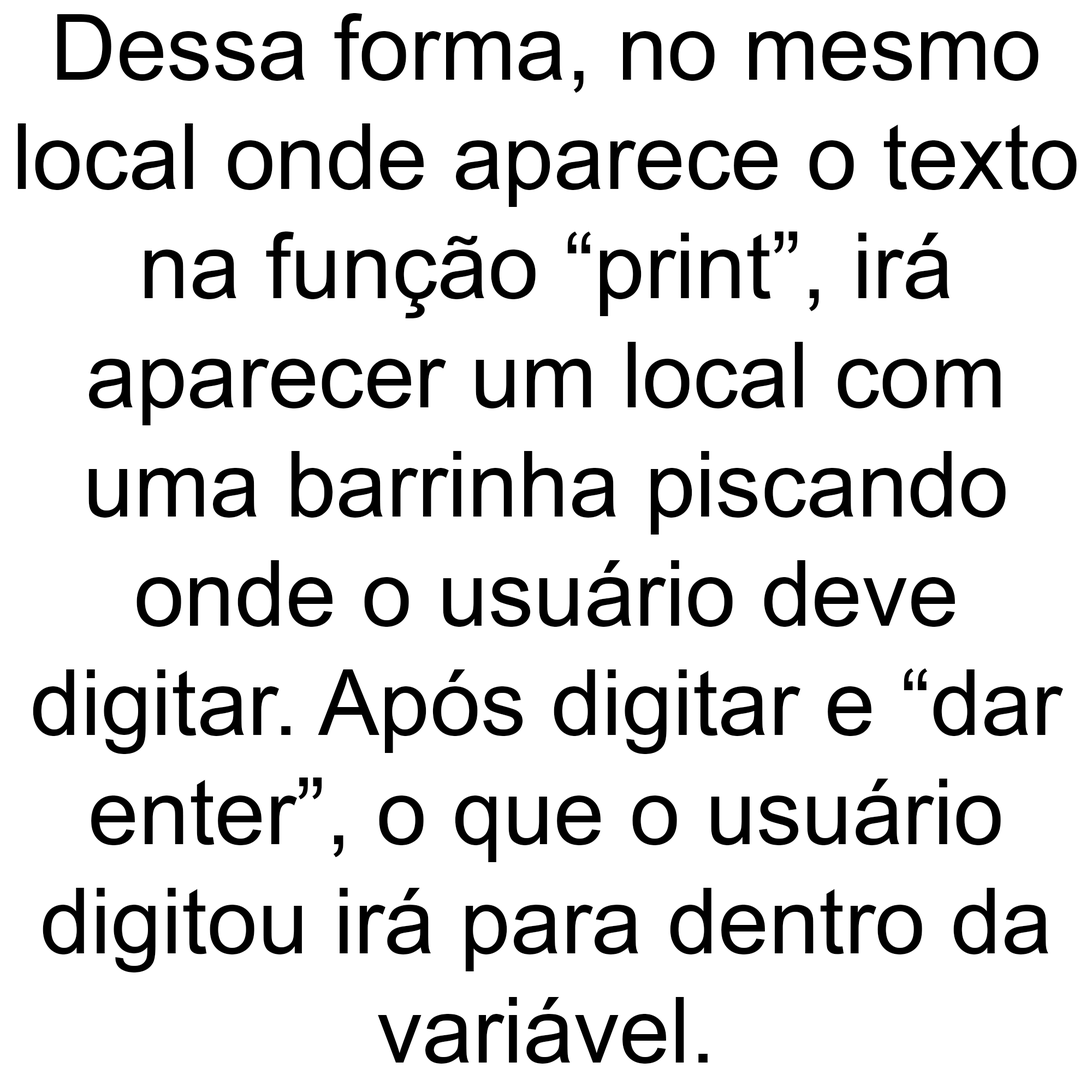
<style>
.page{position:relative;width:1092px;height:1092px;background:#ffffff}
.page>*{position:absolute;margin:0}
.t1{font:91px "ArialMT";color:#000000}
</style>
<div class="page">
<p class="t1" style="left:17px;top:13px;width:1060px;height:1051px;text-align:center">Dessa forma, no mesmo<br>local onde aparece o texto<br>na função “print”, irá<br>aparecer um local com<br>uma barrinha piscando<br>onde o usuário deve<br>digitar. Após digitar e “dar<br>enter”, o que o usuário<br>digitou irá para dentro da<br>variável.</p>
</div>
